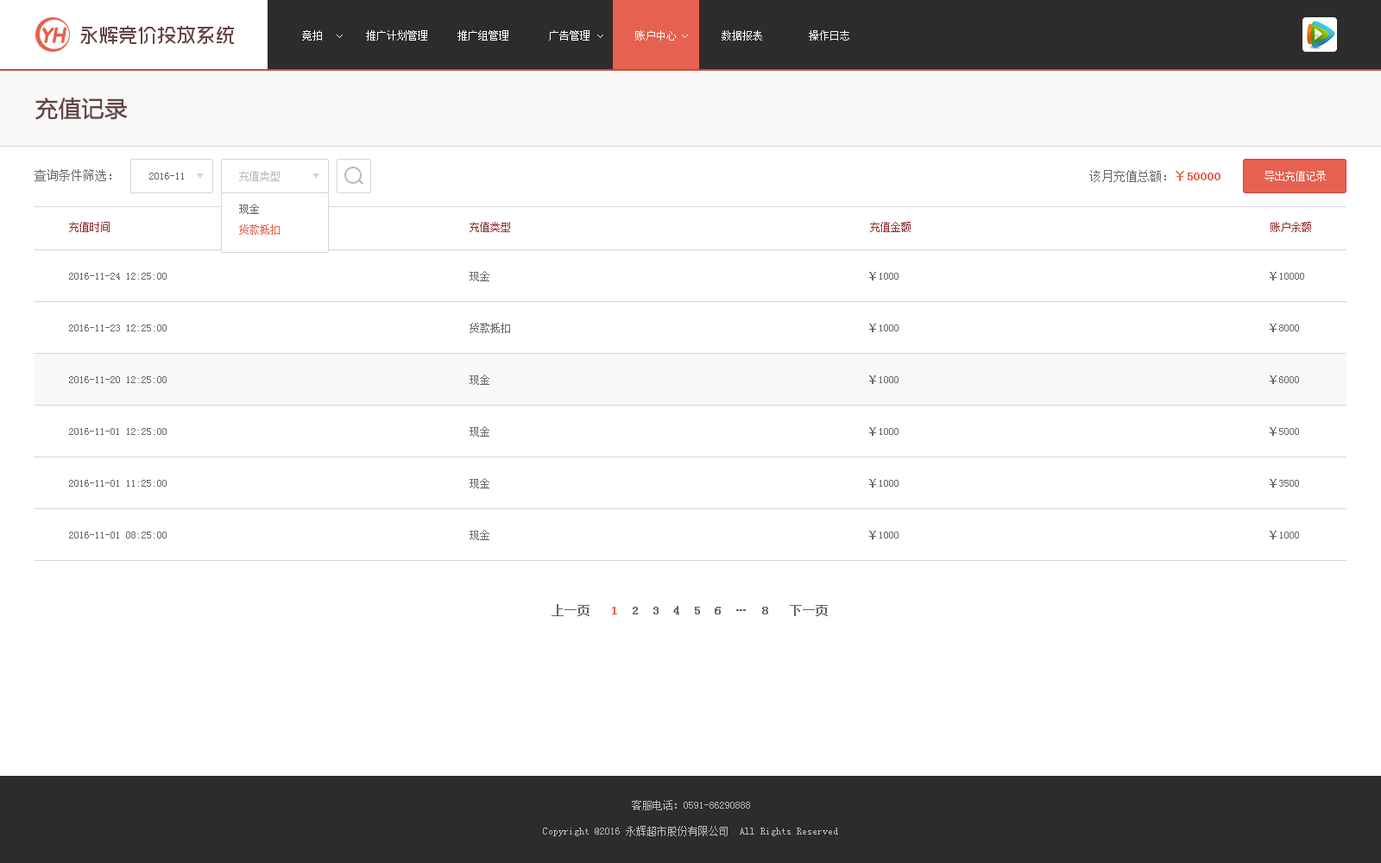
<style>
.page{position:relative;width:1381px;height:863px;background:#ffffff}
.page>*{position:absolute;margin:0}
.t1{font:10.4px "SimSun";color:#ffffff}
.t2{font:10.4px "SimSun";color:#f8f8f8}
.t3{font:22.4px "MicrosoftYaHei";color:#664545;font-weight:bold}
.t4{font:12.1px "SimSun";color:#666666}
.t5{font:10.4px "SimSun";color:#666666}
.t6{font:10.4px "SimSun";color:#bababa}
.t7{font:12.1px "SimSun";color:#e6614f;font-weight:bold}
.t8{font:10.4px/20.7px "SimSun";color:#e6614f}
.t9{font:10.4px/20.7px "SimSun";color:#666666}
.t10{font:10.4px "SimSun";color:#953232}
.t11{font:12.1px "SimSun";color:#666666;font-weight:bold}
</style>
<div class="page">
<p class="t1" style="left:302px;top:30px;width:20px;height:11px">竞拍</p>
<p class="t1" style="left:366px;top:30px;width:61px;height:11px">推广计划管理</p>
<p class="t1" style="left:458px;top:30px;width:50px;height:11px">推广组管理</p>
<p class="t1" style="left:549px;top:30px;width:41px;height:11px">广告管理</p>
<p class="t1" style="left:635px;top:30px;width:41px;height:11px">账户中心</p>
<p class="t1" style="left:635px;top:30px;width:41px;height:11px">账户中心</p>
<p class="t2" style="left:722px;top:30px;width:40px;height:11px">数据报表</p>
<p class="t2" style="left:809px;top:30px;width:40px;height:11px">操作日志</p>
<p class="t3" style="left:35px;top:98px;width:93px;height:22px">充值记录</p>
<p class="t4" style="left:35px;top:169px;width:76px;height:12px">查询条件筛选：</p>
<p class="t5" style="left:149px;top:173px;width:35px;height:7px">2016-11</p>
<p class="t6" style="left:239px;top:171px;width:41px;height:10px">充值类型</p>
<p class="t4" style="left:1089px;top:170px;width:132px;height:12px">该月充值总额：<span class="t7">￥50000</span></p>
<p class="t1" style="left:1265px;top:171px;width:61px;height:10px">导出充值记录</p>
<p class="t8" style="left:239px;top:204px;width:41px;height:31px"><span class="t9">现金<br></span>货款抵扣</p>
<p class="t10" style="left:69px;top:222px;width:41px;height:10px">充值时间</p>
<p class="t10" style="left:470px;top:222px;width:40px;height:10px">充值类型</p>
<p class="t10" style="left:870px;top:222px;width:41px;height:10px">充值金额</p>
<p class="t10" style="left:1271px;top:222px;width:40px;height:10px">账户余额</p>
<p class="t5" style="left:69px;top:273px;width:98px;height:7px">2016-11-24 12:25:00</p>
<p class="t5" style="left:470px;top:271px;width:19px;height:10px">现金</p>
<p class="t5" style="left:869px;top:272px;width:30px;height:9px">￥1000</p>
<p class="t5" style="left:1270px;top:272px;width:34px;height:9px">￥10000</p>
<p class="t5" style="left:69px;top:325px;width:98px;height:7px">2016-11-23 12:25:00</p>
<p class="t5" style="left:470px;top:323px;width:40px;height:10px">货款抵扣</p>
<p class="t5" style="left:869px;top:324px;width:30px;height:8px">￥1000</p>
<p class="t5" style="left:1270px;top:324px;width:29px;height:8px">￥8000</p>
<p class="t5" style="left:69px;top:376px;width:98px;height:7px">2016-11-20 12:25:00</p>
<p class="t5" style="left:470px;top:375px;width:19px;height:10px">现金</p>
<p class="t5" style="left:869px;top:376px;width:30px;height:8px">￥1000</p>
<p class="t5" style="left:1270px;top:376px;width:29px;height:8px">￥6000</p>
<p class="t5" style="left:69px;top:428px;width:98px;height:7px">2016-11-01 12:25:00</p>
<p class="t5" style="left:470px;top:426px;width:19px;height:11px">现金</p>
<p class="t5" style="left:869px;top:427px;width:30px;height:9px">￥1000</p>
<p class="t5" style="left:1270px;top:427px;width:29px;height:9px">￥5000</p>
<p class="t5" style="left:69px;top:480px;width:98px;height:7px">2016-11-01 11:25:00</p>
<p class="t5" style="left:470px;top:478px;width:19px;height:11px">现金</p>
<p class="t5" style="left:869px;top:479px;width:30px;height:9px">￥1000</p>
<p class="t5" style="left:1270px;top:479px;width:29px;height:9px">￥3500</p>
<p class="t5" style="left:69px;top:532px;width:98px;height:7px">2016-11-01 08:25:00</p>
<p class="t5" style="left:470px;top:530px;width:19px;height:10px">现金</p>
<p class="t5" style="left:869px;top:531px;width:30px;height:9px">￥1000</p>
<p class="t5" style="left:1270px;top:531px;width:29px;height:9px">￥1000</p>
<p class="t11" style="left:552px;top:604px;width:276px;height:12px">上一页   <span class="t7">1  </span>2  3  4  5  6  …  8   下一页</p>
<p class="t6" style="left:632px;top:800px;width:118px;height:11px">客服电话：0591-86290888</p>
<p class="t6" style="left:543px;top:826px;width:295px;height:11px">Copyright @2016 永辉超市股份有限公司  All Rights Reserved</p>
</div>
